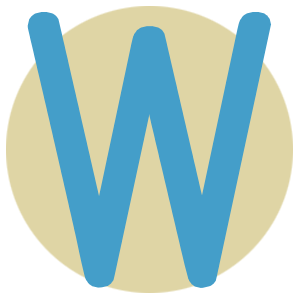
<style>
.page{position:relative;width:300px;height:300px;background:#dfd5a5}
.page>*{position:absolute;margin:0}
.t1{font:354.2px "YanoneKaffeesatz-ExtraLight";color:#449ec9}
</style>
<div class="page">
<p class="t1" style="left:39px;top:24px;width:221px;height:252px">W</p>
</div>
